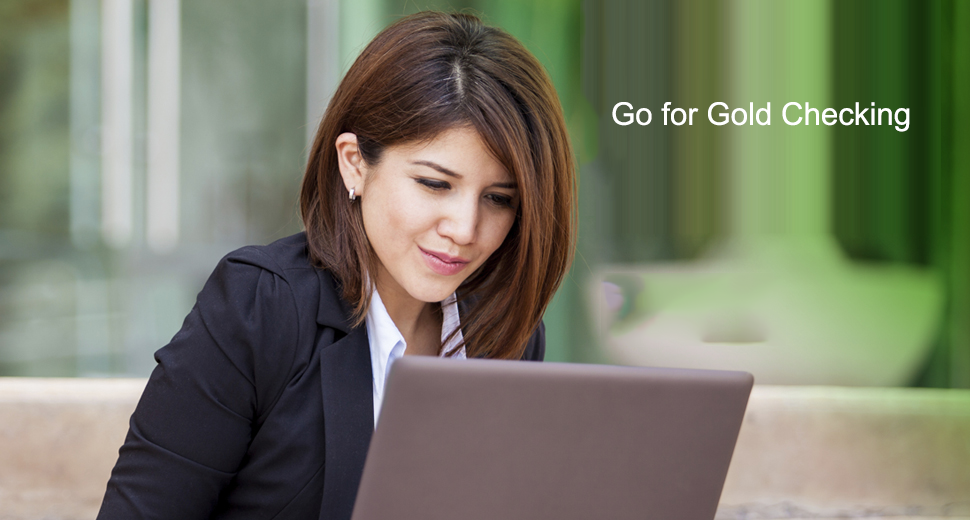
<style>
.page{position:relative;width:970px;height:520px}
.page>*{position:absolute;margin:0}
.t1{font:31.2px "ArialMT";color:#ffffff}
</style>
<div class="page">
<p class="t1" style="left:612px;top:102px;width:298px;height:30px">Go for Gold Checking</p>
</div>
